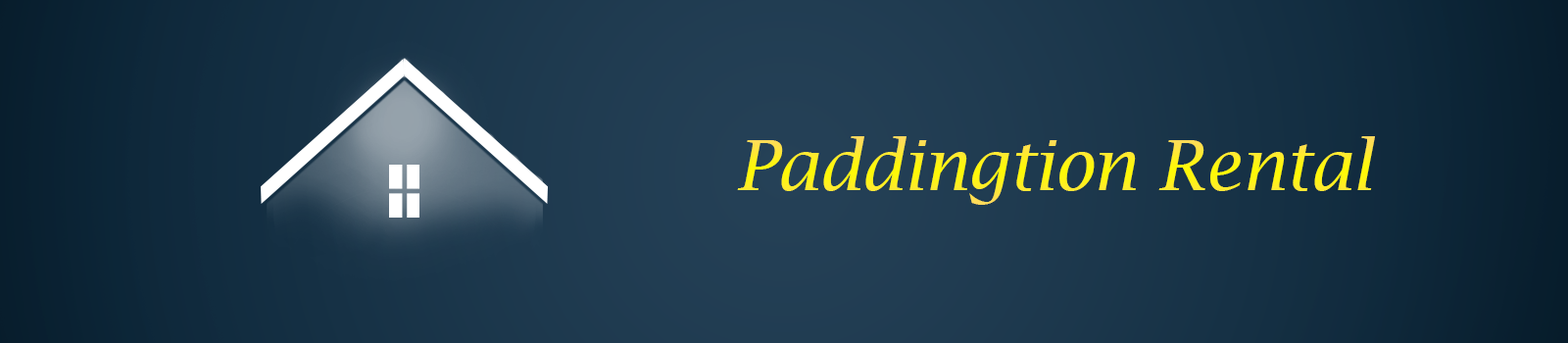
<style>
.page{position:relative;width:1568px;height:343px}
.page>*{position:absolute;margin:0}
.t1{font:69.5px "LucidaBright-Italic";color:#fff01f}
</style>
<div class="page">
<p class="t1" style="left:737px;top:136px;width:638px;height:69px">Paddingtion Rental</p>
</div>
